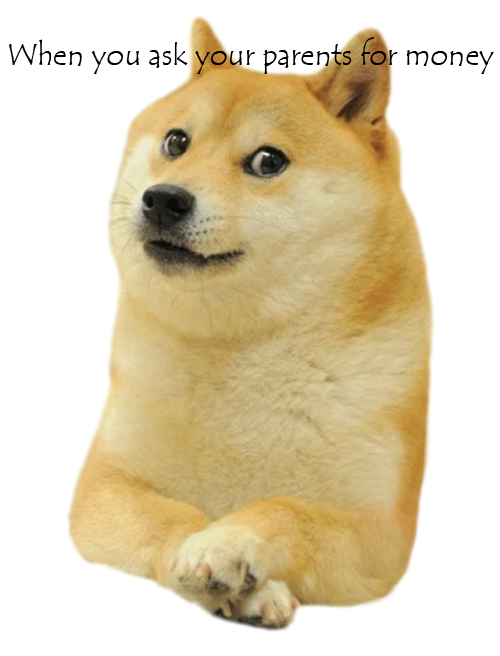
<style>
.page{position:relative;width:500px;height:656px;background:#ffffff}
.page>*{position:absolute;margin:0}
.t1{font:30px "TempusSansITC";color:#000000}
</style>
<div class="page">
<p class="t1" style="left:9px;top:37px;width:485px;height:37px">When you ask your parents for money</p>
</div>
